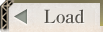
<style>
.page{position:relative;width:103px;height:32px}
.page>*{position:absolute;margin:0}
.t1{font:18px "RyuminPro-ExBold";letter-spacing:-0.04em;color:#59554f}
</style>
<div class="page">
<p class="t1" style="left:44px;top:9px;width:41px;height:15px">Load</p>
</div>
